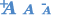
<style>
.page{position:relative;width:60px;height:16px;background:#ffffff}
.page>*{position:absolute;margin:0}
.t1{font:14px "Georgia-Bold";color:#4d87c7}
.t2{font:18px "Georgia-BoldItalic";color:#4d87c7}
.t3{font:14px "Georgia-BoldItalic";color:#4d87c7}
.t4{font:11px "Georgia-BoldItalic";color:#4d87c7}
</style>
<div class="page">
<p class="t1" style="left:0px;top:0px;width:8px;height:8px">+</p>
<p class="t2" style="left:1px;top:1px;width:16px;height:14px">A</p>
<p class="t3" style="left:22px;top:4px;width:13px;height:11px">A</p>
<p class="t4" style="left:41px;top:6px;width:10px;height:9px">A</p>
<p class="t1" style="left:41px;top:3px;width:5px;height:2px">-</p>
</div>
